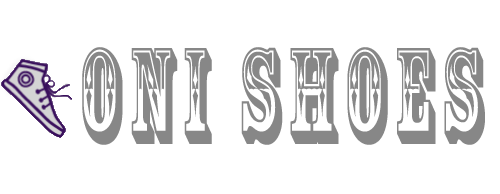
<style>
.page{position:relative;width:500px;height:194px;background:#ffffff}
.page>*{position:absolute;margin:0}
.t1{font:128px "RosewoodStd-Regular";letter-spacing:0.1em;color:#878787;scale:0.6 1}
</style>
<div class="page">
<p class="t1" style="left:82px;top:47px;width:403px;height:98px">ONI SHOES</p>
</div>
